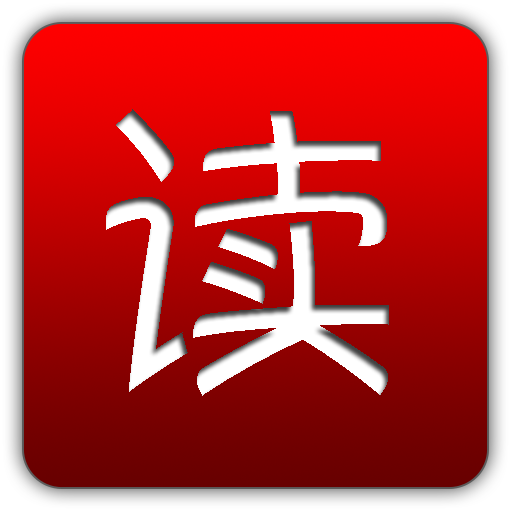
<style>
.page{position:relative;width:512px;height:512px}
.page>*{position:absolute;margin:0}
.t1{font:330.3px "YuppySC-Regular";color:#ffffff}
</style>
<div class="page">
<p class="t1" style="left:106px;top:109px;width:283px;height:287px">读</p>
</div>
